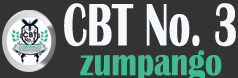
<style>
.page{position:relative;width:238px;height:78px;background:#333333}
.page>*{position:absolute;margin:0}
.t1{font:62.1px "BritannicBold";color:#f6fafc;scale:0.64 1}
.t2{font:62.2px "ArialMT";color:#f6f9fb;scale:0.64 1}
</style>
<div class="page">
<p class="t1" style="left:64px;top:3px;width:172px;height:44px"><span class="t2"> </span>CBT No. 3</p>
</div>
